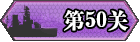
<style>
.page{position:relative;width:140px;height:42px}
.page>*{position:absolute;margin:0}
.t1{font:22px "HYa9gj";color:#ffffff}
</style>
<div class="page">
<p class="t1" style="left:64px;top:10px;width:64px;height:21px">第50关</p>
</div>
